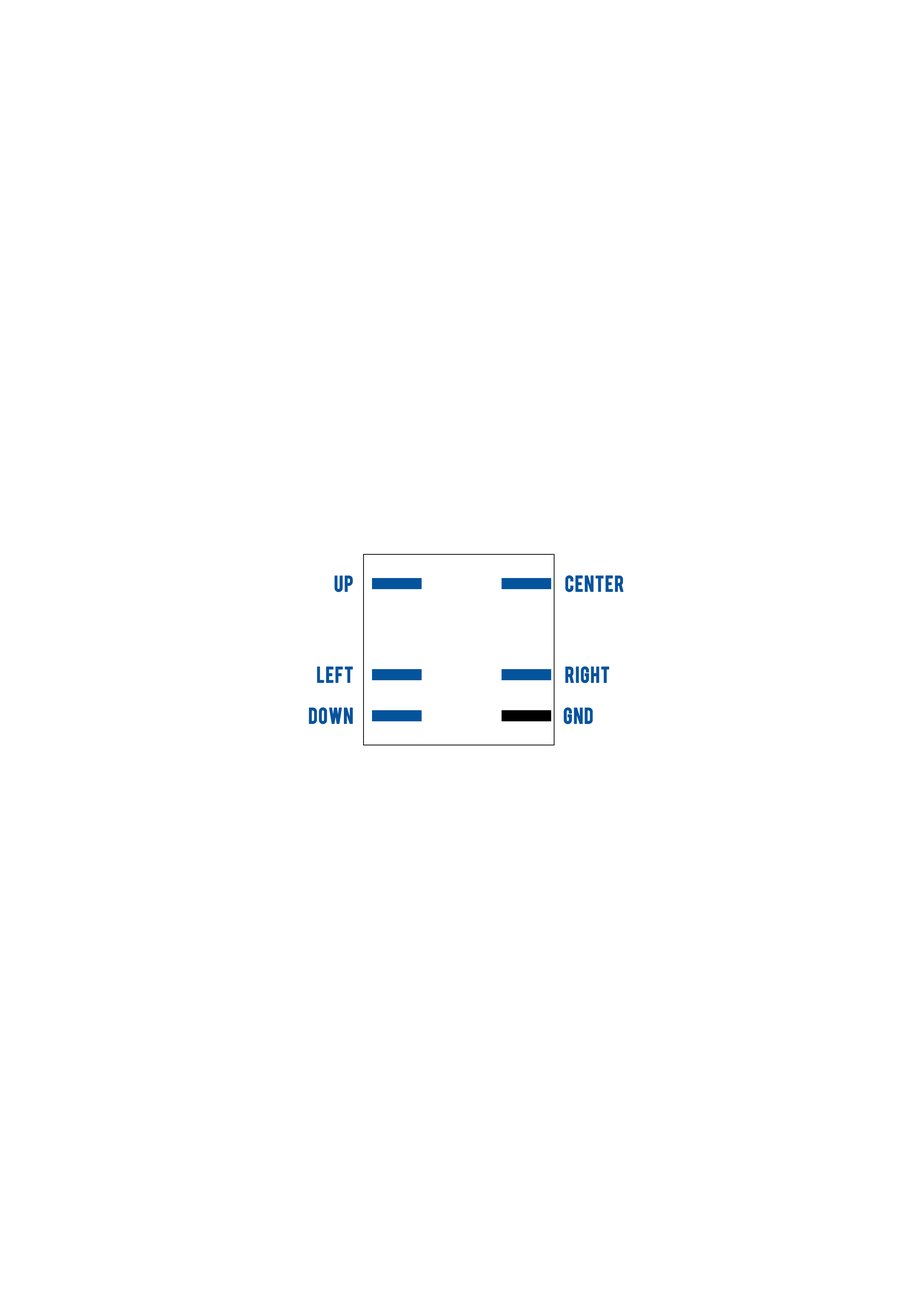
<style>
.page{position:relative;width:918px;height:1299px;background:#ffffff}
.page>*{position:absolute;margin:0}
.t1{font:17.8px "Bebas";letter-spacing:0.025em;color:#04549d;font-weight:bold}
</style>
<div class="page">
<p class="t1" style="left:334px;top:575px;width:19px;height:17px">up</p>
<p class="t1" style="left:565px;top:575px;width:59px;height:17px">CENTER</p>
<p class="t1" style="left:317px;top:666px;width:36px;height:17px">left</p>
<p class="t1" style="left:565px;top:666px;width:44px;height:17px">RIGHT</p>
<p class="t1" style="left:309px;top:707px;width:44px;height:17px">down</p>
<p class="t1" style="left:564px;top:707px;width:29px;height:17px">GND</p>
</div>
